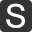
<style>
.page{position:relative;width:32px;height:32px;background:#333333}
.page>*{position:absolute;margin:0}
.t1{font:33px "ArialMT";color:#ffffff;text-transform:uppercase}
</style>
<div class="page">
<p class="t1" style="left:6px;top:3px;width:19px;height:25px">S</p>
</div>
